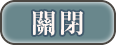
<style>
.page{position:relative;width:116px;height:45px;background:#69878c}
.page>*{position:absolute;margin:0}
.t1{font:26px "RyuminPr6N-ExBold";letter-spacing:0.05em;color:#fff6f2}
</style>
<div class="page">
<p class="t1" style="left:32px;top:10px;width:51px;height:26px">關閉</p>
</div>
